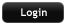
<style>
.page{position:relative;width:66px;height:25px;background:#0d0d0d}
.page>*{position:absolute;margin:0}
.t1{font:10.4px "TrebuchetMS-Bold";letter-spacing:0.015em;color:#ffffff}
</style>
<div class="page">
<p class="t1" style="left:21px;top:8px;width:26px;height:11px">Login</p>
</div>
